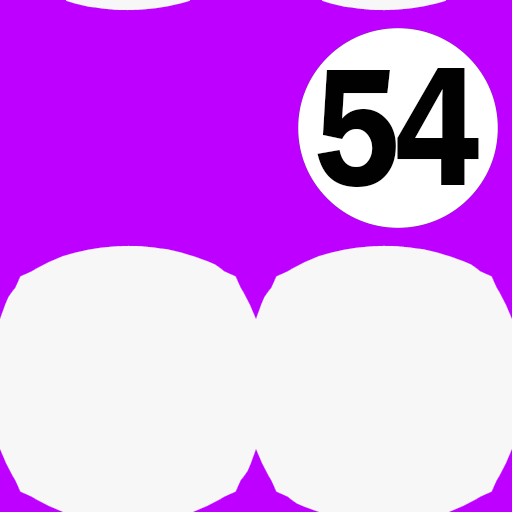
<style>
.page{position:relative;width:512px;height:512px;background:#f7f7f7}
.page>*{position:absolute;margin:0}
.t1{font:172.5px "FranklinGothic-Demi";letter-spacing:-0.05em;color:#010101;scale:0.87 1}
</style>
<div class="page">
<p class="t1" style="left:317px;top:68px;width:162px;height:119px">54</p>
</div>
